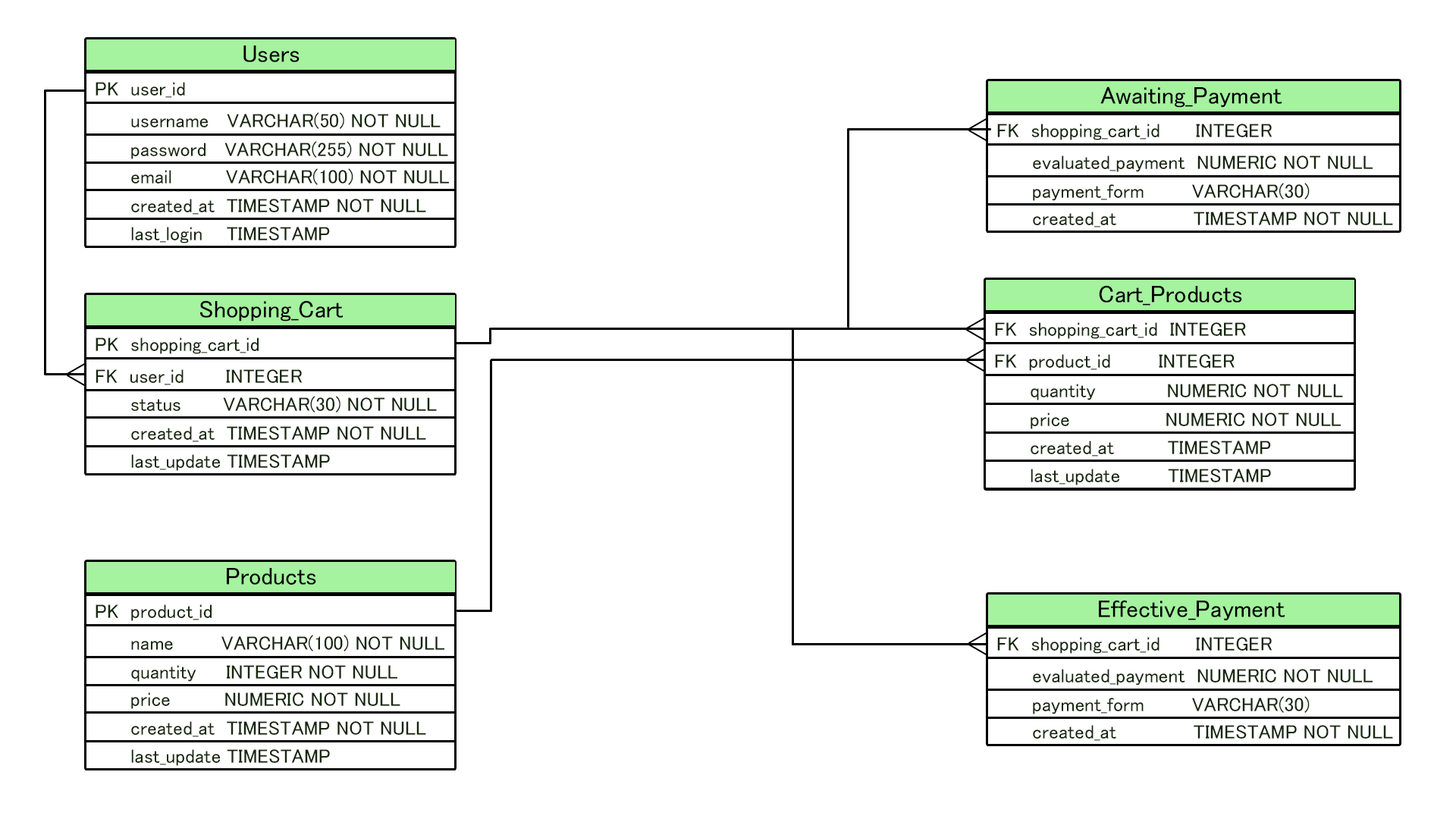
<style>
.page{position:relative;width:1456px;height:819px;background:#ffffff}
.page>*{position:absolute;margin:0}
.t1{font:24.4px "MS-UIGothic";color:#000000}
.t2{font:19.5px "MS-UIGothic";color:#16270d}
</style>
<div class="page">
<p class="t1" style="left:243px;top:45px;width:57px;height:17px">Users</p>
<p class="t2" style="left:96px;top:82px;width:89px;height:16px">PK  user_id</p>
<p class="t1" style="left:1100px;top:86px;width:182px;height:22px">Awaiting_Payment</p>
<p class="t2" style="left:131px;top:112px;width:310px;height:17px">username   VARCHAR(50) NOT NULL</p>
<p class="t2" style="left:997px;top:124px;width:275px;height:16px">FK  shopping_cart_id      INTEGER</p>
<p class="t2" style="left:131px;top:141px;width:317px;height:18px">password   VARCHAR(255) NOT NULL</p>
<p class="t2" style="left:1033px;top:155px;width:340px;height:17px">evaluated_payment  NUMERIC NOT NULL</p>
<p class="t2" style="left:131px;top:168px;width:318px;height:17px">email         VARCHAR(100) NOT NULL</p>
<p class="t2" style="left:1033px;top:183px;width:277px;height:18px">payment_form        VARCHAR(30)</p>
<p class="t2" style="left:131px;top:199px;width:295px;height:16px">created_at  TIMESTAMP NOT NULL</p>
<p class="t2" style="left:1033px;top:212px;width:360px;height:15px">created_at             TIMESTAMP NOT NULL</p>
<p class="t2" style="left:131px;top:227px;width:199px;height:16px">last_login    TIMESTAMP</p>
<p class="t1" style="left:1099px;top:285px;width:143px;height:21px">Cart_Products</p>
<p class="t1" style="left:200px;top:300px;width:143px;height:22px">Shopping_Cart</p>
<p class="t2" style="left:995px;top:322px;width:251px;height:17px">FK  shopping_cart_id  INTEGER</p>
<p class="t2" style="left:96px;top:337px;width:163px;height:17px">PK  shopping_cart_id</p>
<p class="t2" style="left:995px;top:354px;width:240px;height:17px">FK  product_id        INTEGER</p>
<p class="t2" style="left:96px;top:369px;width:207px;height:16px">FK  user_id       INTEGER</p>
<p class="t2" style="left:1031px;top:384px;width:312px;height:16px">quantity            NUMERIC NOT NULL</p>
<p class="t2" style="left:131px;top:396px;width:306px;height:17px">status       VARCHAR(30) NOT NULL</p>
<p class="t2" style="left:1031px;top:413px;width:310px;height:16px">price                NUMERIC NOT NULL</p>
<p class="t2" style="left:131px;top:426px;width:295px;height:16px">created_at  TIMESTAMP NOT NULL</p>
<p class="t2" style="left:1031px;top:441px;width:240px;height:16px">created_at         TIMESTAMP</p>
<p class="t2" style="left:131px;top:454px;width:199px;height:17px">last_update TIMESTAMP</p>
<p class="t2" style="left:1031px;top:469px;width:240px;height:16px">last_update        TIMESTAMP</p>
<p class="t1" style="left:227px;top:568px;width:89px;height:17px">Products</p>
<p class="t2" style="left:96px;top:604px;width:116px;height:17px">PK  product_id</p>
<p class="t1" style="left:1099px;top:600px;width:186px;height:21px">Effective_Payment</p>
<p class="t2" style="left:131px;top:635px;width:313px;height:16px">name        VARCHAR(100) NOT NULL</p>
<p class="t2" style="left:997px;top:637px;width:275px;height:17px">FK  shopping_cart_id      INTEGER</p>
<p class="t2" style="left:131px;top:665px;width:266px;height:17px">quantity     INTEGER NOT NULL</p>
<p class="t2" style="left:1033px;top:669px;width:340px;height:17px">evaluated_payment  NUMERIC NOT NULL</p>
<p class="t2" style="left:131px;top:692px;width:269px;height:17px">price         NUMERIC NOT NULL</p>
<p class="t2" style="left:1033px;top:696px;width:277px;height:18px">payment_form        VARCHAR(30)</p>
<p class="t2" style="left:131px;top:721px;width:295px;height:16px">created_at  TIMESTAMP NOT NULL</p>
<p class="t2" style="left:1033px;top:725px;width:360px;height:16px">created_at             TIMESTAMP NOT NULL</p>
<p class="t2" style="left:131px;top:749px;width:199px;height:17px">last_update TIMESTAMP</p>
</div>
